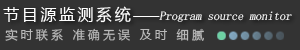
<style>
.page{position:relative;width:300px;height:50px;background:#333333}
.page>*{position:absolute;margin:0}
.t1{font:12px "SimSun";color:#ffffff;font-style:italic}
.t2{font:16px "MicrosoftYaHei";letter-spacing:0.16em;color:#ffffff}
.t3{font:12px "MicrosoftYaHei";color:#ffffff}
.t4{font:12px "MicrosoftYaHei";letter-spacing:0.26em;color:#bababa}
</style>
<div class="page">
<p class="t1" style="left:3px;top:6px;width:289px;height:17px"><span class="t2">节目源监测系统</span><span class="t3">——</span>Program source monitor</p>
<p class="t4" style="left:5px;top:28px;width:199px;height:13px">实时联系 准确无误 及时 细腻</p>
</div>
